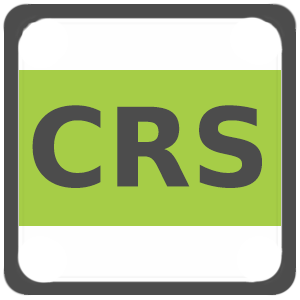
<style>
.page{position:relative;width:300px;height:300px;background:#a6cd47}
.page>*{position:absolute;margin:0}
.t1{font:109.1px "DejaVuSans-Bold";color:#4c4c4c}
</style>
<div class="page">
<p class="t1" style="left:32px;top:105px;width:230px;height:83px">CRS</p>
</div>
